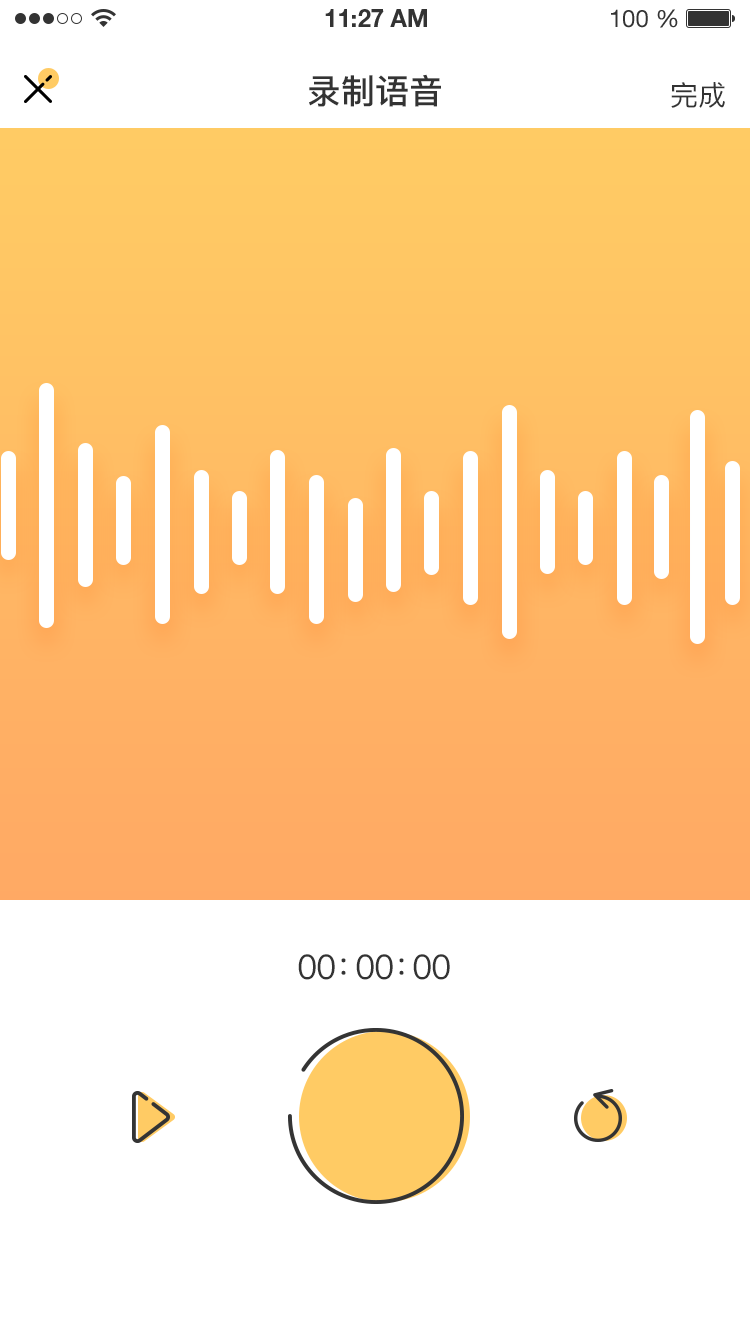
<style>
.page{position:relative;width:750px;height:1334px;background:#ffffff}
.page>*{position:absolute;margin:0}
.t1{font:34px "PingFang-SC-Bold";color:#333333;text-transform:uppercase}
.t2{font:28px "PingFang-SC-Medium";color:#333333;text-transform:uppercase}
.t3{font:34px "PingFang-SC-Medium";letter-spacing:-0.04em;color:#333333;text-transform:uppercase}
.t4{font:34px "PingFang-SC-Medium";letter-spacing:-0.42em;color:#333333;text-transform:uppercase}
.t5{font:34px "PingFang-SC-Medium";letter-spacing:-0.44em;color:#333333;text-transform:uppercase}
</style>
<div class="page">
<p class="t1" style="left:309px;top:74px;width:132px;height:33px">录制语音</p>
<p class="t2" style="left:671px;top:82px;width:54px;height:26px">完成</p>
<p class="t3" style="left:298px;top:954px;width:152px;height:26px">00<span class="t4">：</span>00<span class="t5">：</span>00</p>
</div>
